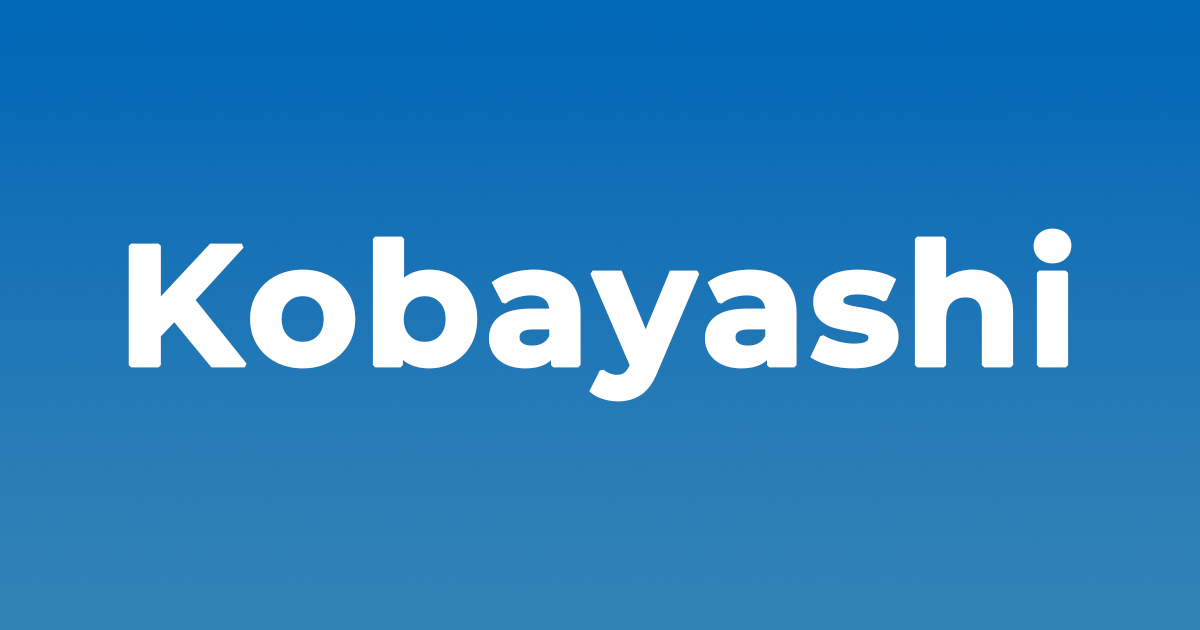
<style>
.page{position:relative;width:1200px;height:630px}
.page>*{position:absolute;margin:0}
.t1{font:170px "Montserrat-Bold";color:#ffffff;font-weight:bold}
</style>
<div class="page">
<p class="t1" style="left:128px;top:228px;width:944px;height:174px">Kobayashi</p>
</div>
